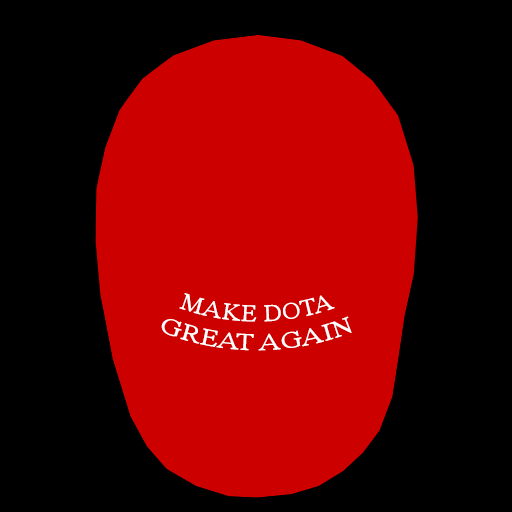
<style>
.page{position:relative;width:512px;height:512px;background:#000000}
.page>*{position:absolute;margin:0}
.t1{font:24px "TimesNewRomanPSMT";color:#ffffff}
</style>
<div class="page">
<p class="t1" style="left:161px;top:293px;width:191px;height:58px;text-align:center">MAKE DOTA<br>GREAT AGAIN</p>
</div>
